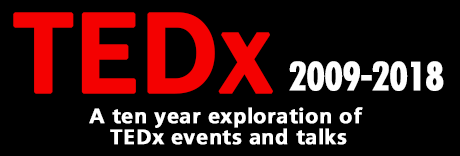
<style>
.page{position:relative;width:460px;height:156px;background:#000000}
.page>*{position:absolute;margin:0}
.t1{font:116.7px "FranklinGothic-Medium";color:#f40101;font-weight:bold}
.t2{font:37.5px "PFFuturaNeuCond-Bold";letter-spacing:-0.04em;color:#fefefe;font-weight:bold}
.t3{font:20.8px/20.8px "PFCatalog-Bold";letter-spacing:0.02em;color:#ffffff;font-weight:bold}
</style>
<div class="page">
<p class="t1" style="left:13px;top:12px;width:260px;height:82px">TEDx</p>
<p class="t2" style="left:289px;top:61px;width:155px;height:30px">2009-2018</p>
<p class="t3" style="left:89px;top:107px;width:274px;height:38px;text-align:center">A ten year exploration of <br>TEDx events and talks</p>
</div>
